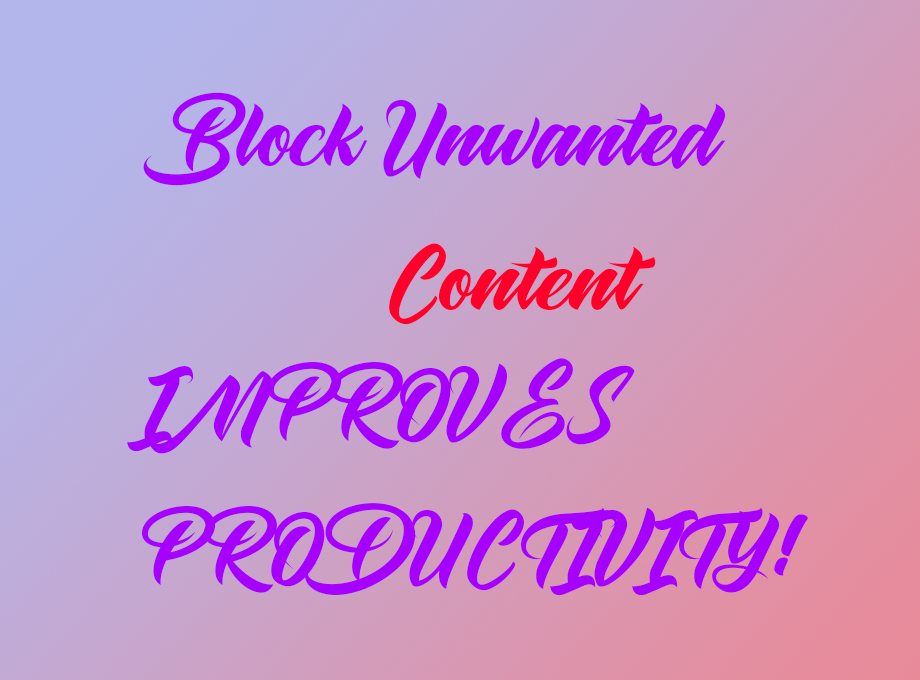
<style>
.page{position:relative;width:920px;height:680px}
.page>*{position:absolute;margin:0}
.t1{font:120px "Maghrib";color:#a600ff}
.t2{font:120px "Maghrib";color:#ff002a}
</style>
<div class="page">
<p class="t1" style="left:143px;top:92px;width:583px;height:233px">Block Unwanted<br><span class="t2">      Content</span></p>
<p class="t1" style="left:127px;top:358px;width:682px;height:238px">IMPROVES<br>PRODUCTIVITY!</p>
</div>
